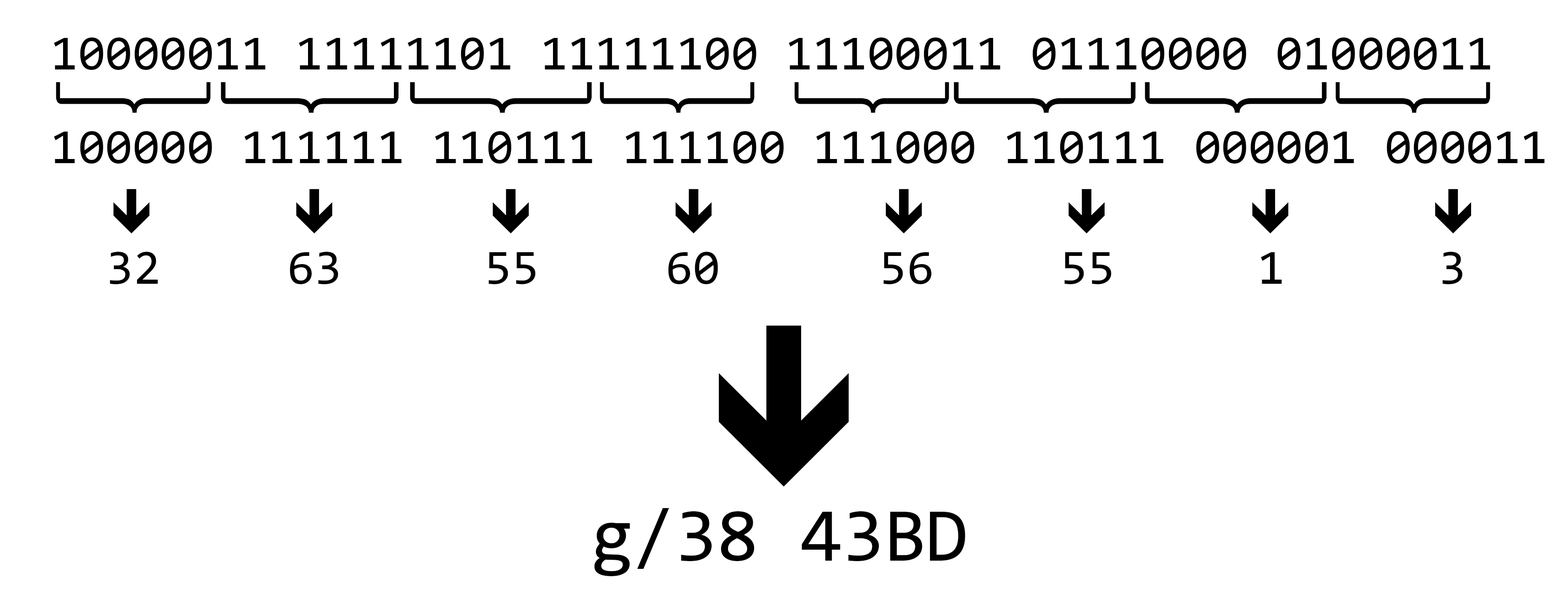
<style>
.page{position:relative;width:1568px;height:615px;background:#ffffff}
.page>*{position:absolute;margin:0}
.t1{font:49.5px "Consolas";color:#000000}
.t2{font:200.3px "Raleway-Thin";letter-spacing:-0.18em;color:#000000;scale:1.46 1}
.t3{font:230.3px "Raleway-Thin";letter-spacing:-0.18em;color:#000000;scale:1.27 1}
.t4{font:235.6px "Raleway-Thin";letter-spacing:-0.18em;color:#000000;scale:1.24 1}
.t5{font:76.2px "Consolas";color:#000000}
</style>
<div class="page">
<p class="t1" style="left:54px;top:37px;width:1436px;height:33px">10000011 11111101 11111100 11100011 01110000 01000011</p>
<p class="t2" style="left:56px;top:82px;width:155px;height:31px;rotate:90deg">}</p>
<p class="t3" style="left:221px;top:82px;width:178px;height:31px;rotate:90deg">}</p>
<p class="t4" style="left:410px;top:82px;width:182px;height:31px;rotate:90deg">}</p>
<p class="t2" style="left:600px;top:82px;width:155px;height:31px;rotate:90deg">}</p>
<p class="t2" style="left:794px;top:82px;width:155px;height:31px;rotate:90deg">}</p>
<p class="t4" style="left:954px;top:82px;width:182px;height:31px;rotate:90deg">}</p>
<p class="t4" style="left:1145px;top:82px;width:182px;height:31px;rotate:90deg">}</p>
<p class="t2" style="left:1335px;top:82px;width:155px;height:31px;rotate:90deg">}</p>
<p class="t1" style="left:54px;top:131px;width:1491px;height:33px">100000 111111 110111 111100 111000 110111 000001 000011</p>
<p class="t1" style="left:110px;top:252px;width:1352px;height:32px">32        63         55        60          56        55         1         3</p>
<p class="t5" style="left:594px;top:508px;width:371px;height:68px">g/38 43BD</p>
</div>
